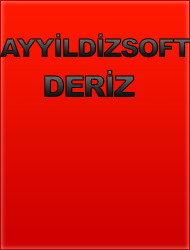
<style>
.page{position:relative;width:190px;height:250px}
.page>*{position:absolute;margin:0}
.t1{font:26px "Arial-Black";letter-spacing:-0.07em}
.t2{font:30px "Arial-Black";letter-spacing:-0.07em}
</style>
<div class="page">
<p class="t1" style="left:0px;top:33px;width:191px;height:25px">AYYİLDİZSOFT</p>
<p class="t2" style="left:44px;top:70px;width:91px;height:27px">DERİZ</p>
</div>
